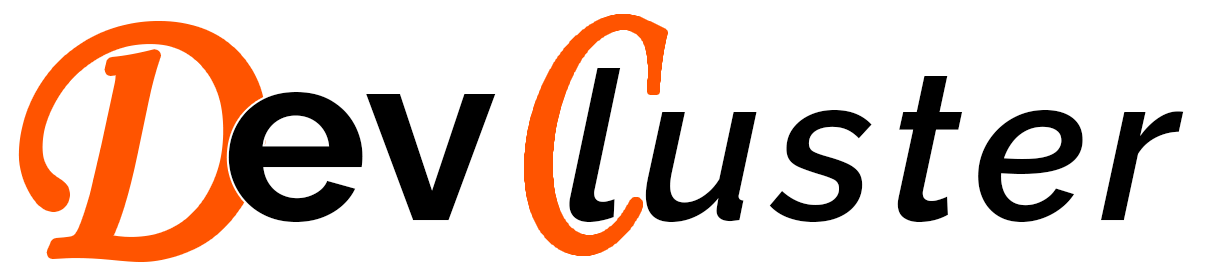
<style>
.page{position:relative;width:1206px;height:276px;background:#ffffff}
.page>*{position:absolute;margin:0}
.t1{font:347.2px "MonotypeCorsiva";color:#ff5400;scale:0.77 1}
.t2{font:384.3px "MonotypeCorsiva";color:#ff5400;scale:0.9 1}
.t3{font:208.3px "Raleway-SemiBoldItalic";letter-spacing:0.081em;color:#000000}
.t4{font:243.1px "Raleway-Bold";color:#000000}
</style>
<div class="page">
<p class="t1" style="left:527px;top:17px;width:138px;height:236px">C</p>
<p class="t2" style="left:24px;top:27px;width:237px;height:229px">D</p>
<p class="t3" style="left:228px;top:68px;width:956px;height:154px"><span class="t4">ev </span>luster</p>
</div>
